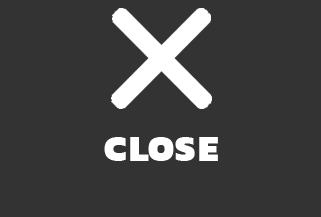
<style>
.page{position:relative;width:321px;height:217px;background:#333333}
.page>*{position:absolute;margin:0}
.t1{font:36px "Kanit-Black";letter-spacing:0.072em;color:#ffffff}
</style>
<div class="page">
<p class="t1" style="left:104px;top:137px;width:114px;height:24px">CLOSE</p>
</div>
